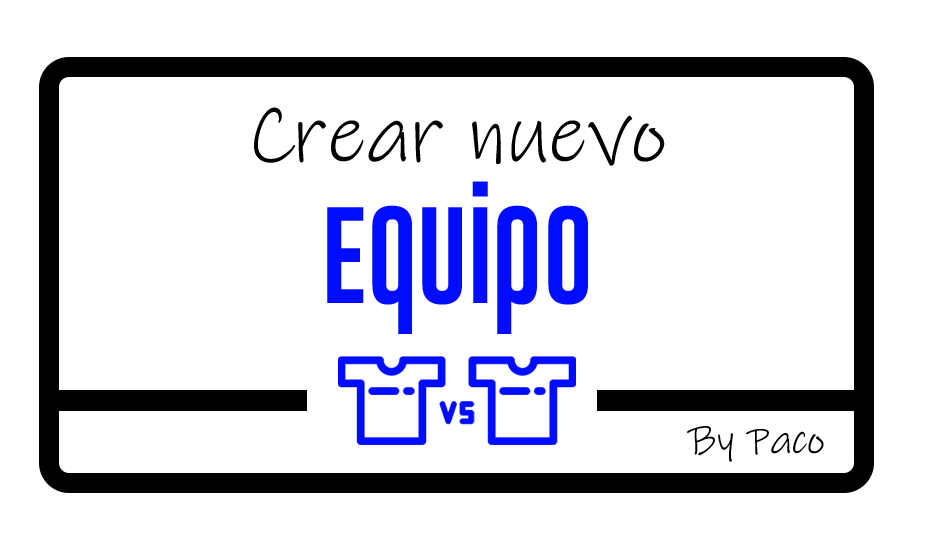
<style>
.page{position:relative;width:932px;height:546px;background:#ffffff}
.page>*{position:absolute;margin:0}
.t1{font:83.3px/141.7px "InkFree";color:#000000}
.t2{font:100px/141.7px "GoboldUplow";color:#000cff}
.t3{font:41.7px "InkFree";color:#000000}
</style>
<div class="page">
<p class="t1" style="left:254px;top:107px;width:411px;height:227px;text-align:center">Crear nuevo<br><span class="t2">Equipo</span></p>
<p class="t3" style="left:687px;top:426px;width:137px;height:36px">By Paco</p>
</div>
